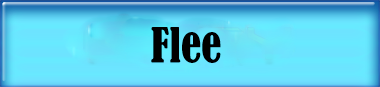
<style>
.page{position:relative;width:380px;height:87px}
.page>*{position:absolute;margin:0}
.t1{font:45px "BernardMT-Condensed";color:#000000}
</style>
<div class="page">
<p class="t1" style="left:151px;top:27px;width:70px;height:36px">Flee</p>
</div>
